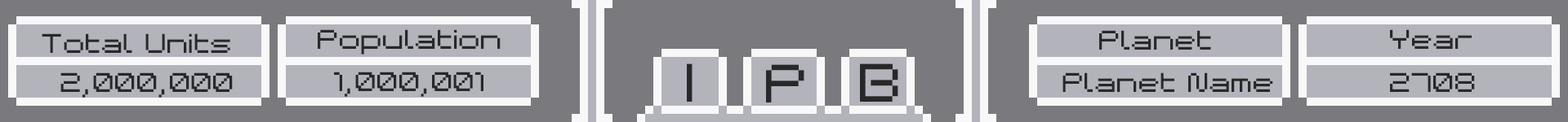
<style>
.page{position:relative;width:1568px;height:122px;background:#7a7a7e}
.page>*{position:absolute;margin:0}
.t1{font:24.5px "BMspaceA9";color:#282828}
.t2{font:49px "BMspaceA9";color:#282828}
</style>
<div class="page">
<p class="t1" style="left:318px;top:29px;width:183px;height:26px">Population</p>
<p class="t1" style="left:1390px;top:29px;width:82px;height:20px">Year</p>
<p class="t1" style="left:42px;top:33px;width:188px;height:20px">Total Units</p>
<p class="t1" style="left:1099px;top:30px;width:112px;height:20px">Planet</p>
<p class="t2" style="left:687px;top:64px;width:6px;height:38px">I</p>
<p class="t2" style="left:766px;top:65px;width:38px;height:38px">P</p>
<p class="t2" style="left:860px;top:64px;width:38px;height:38px">B</p>
<p class="t1" style="left:60px;top:73px;width:173px;height:25px">2,000,000</p>
<p class="t1" style="left:334px;top:72px;width:149px;height:25px">1,000,001</p>
<p class="t1" style="left:1062px;top:73px;width:211px;height:19px">Planet Name</p>
<p class="t1" style="left:1390px;top:73px;width:85px;height:19px">2708</p>
</div>
